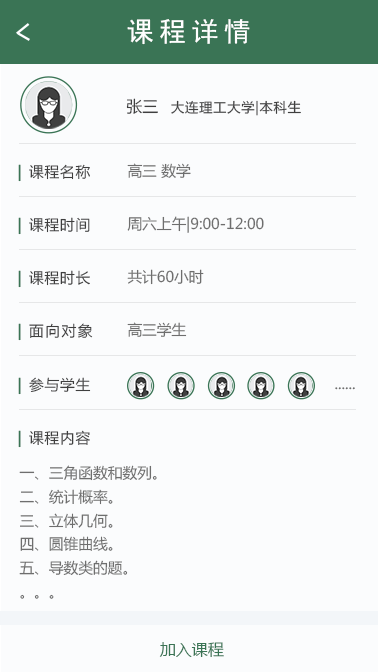
<style>
.page{position:relative;width:378px;height:672px;background:#fbfcfd}
.page>*{position:absolute;margin:0}
.t1{font:26.7px "SimHei";letter-spacing:0.2em;color:#ffffff}
.t2{font:13.3px "MicrosoftYaHei";letter-spacing:0.05em;color:#3f3f3f}
.t3{font:16px "MicrosoftYaHei";color:#3f3f3f}
.t4{font:14.7px "MicrosoftYaHei";letter-spacing:0.05em;color:#3f3f3f}
.t5{font:14.7px "MicrosoftYaHei";letter-spacing:0.1em;color:#3a7455;font-weight:bold}
.t6{font:14.7px "MicrosoftYaHei";color:#6e6e6e}
.t7{font:14.7px "MicrosoftYaHei";letter-spacing:0.1em;color:#3f3f3f}
.t8{font:14.7px/23.7px "MicrosoftYaHei";color:#6e6e6e}
.t9{font:16px "MicrosoftYaHei";color:#3a7455}
</style>
<div class="page">
<p class="t1" style="left:127px;top:19px;width:123px;height:26px">课程详情</p>
<p class="t2" style="left:126px;top:98px;width:175px;height:18px"><span class="t3">张三   </span>大连理工大学|本科生</p>
<p class="t4" style="left:18px;top:164px;width:72px;height:18px"><span class="t5">| </span>课程名称</p>
<p class="t6" style="left:127px;top:163px;width:64px;height:15px">高三 数学</p>
<p class="t4" style="left:18px;top:217px;width:72px;height:18px"><span class="t5">| </span>课程时间</p>
<p class="t6" style="left:127px;top:216px;width:137px;height:17px">周六上午|9:00-12:00</p>
<p class="t4" style="left:18px;top:270px;width:72px;height:18px"><span class="t5">| </span>课程时长</p>
<p class="t6" style="left:127px;top:269px;width:77px;height:16px">共计60小时</p>
<p class="t7" style="left:18px;top:323px;width:75px;height:18px"><span class="t5">|</span> 面向对象</p>
<p class="t6" style="left:127px;top:322px;width:60px;height:15px">高三学生</p>
<p class="t4" style="left:18px;top:377px;width:73px;height:18px"><span class="t5">| </span>参与学生</p>
<p class="t6" style="left:335px;top:387px;width:20px;height:3px">......</p>
<p class="t4" style="left:18px;top:430px;width:72px;height:18px"><span class="t5">| </span>课程内容</p>
<p class="t8" style="left:19px;top:465px;width:138px;height:134px">一、三角函数和数列。<br>二、统计概率。<br>三、立体几何。<br>四、圆锥曲线。<br>五、导数类的题。<br>。。。</p>
<p class="t9" style="left:159px;top:642px;width:65px;height:15px">加入课程</p>
</div>
